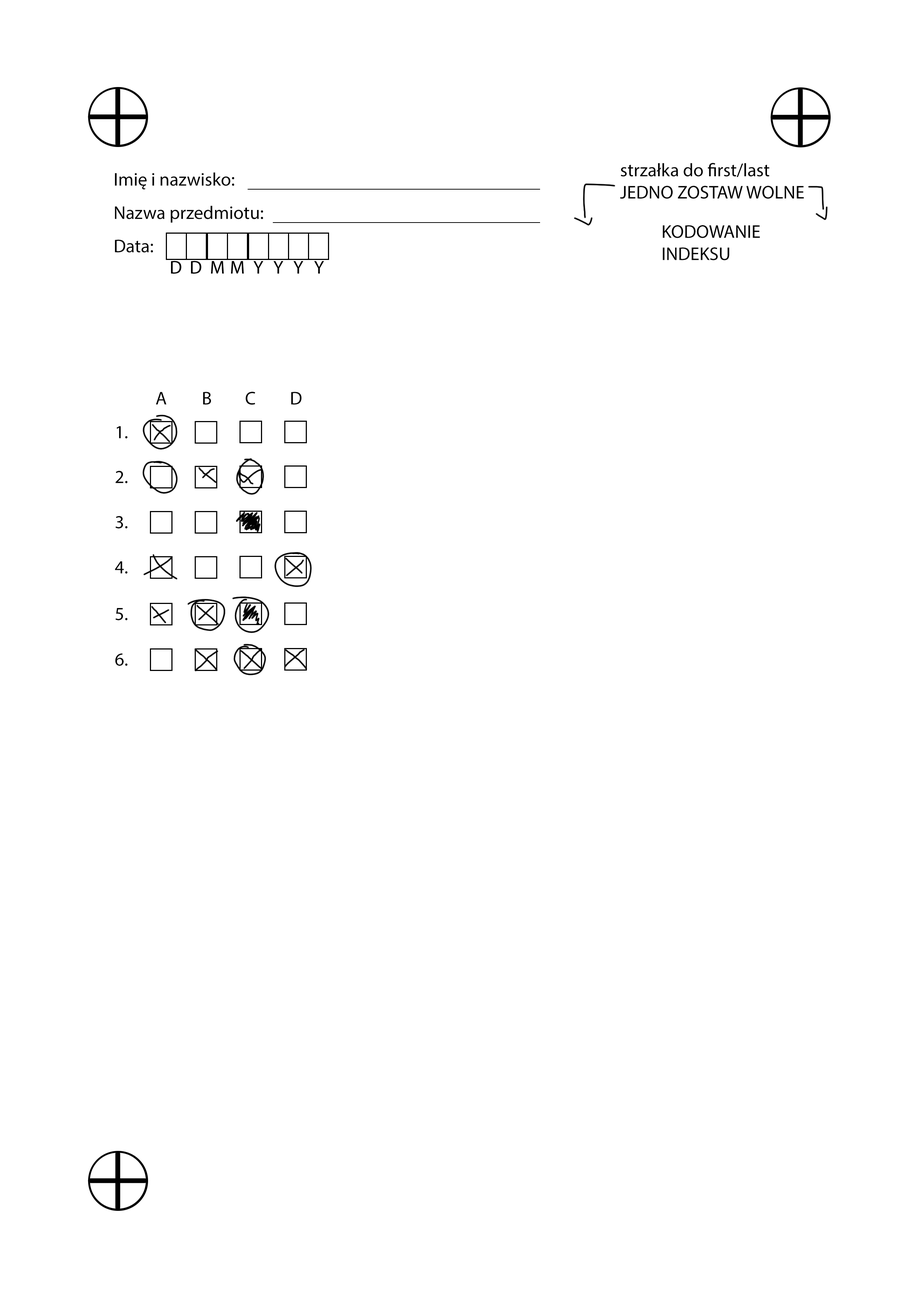
<style>
.page{position:relative;width:918px;height:1299px;background:#ffffff}
.page>*{position:absolute;margin:0}
.t1{font:18.5px "MyriadPro-Regular";color:#000000}
</style>
<div class="page">
<p class="t1" style="left:115px;top:172px;width:119px;height:18px">Imię i nazwisko:</p>
<p class="t1" style="left:620px;top:163px;width:184px;height:36px">strzałka do first/last<br>JEDNO ZOSTAW WOLNE</p>
<p class="t1" style="left:115px;top:205px;width:148px;height:18px">Nazwa przedmiotu:</p>
<p class="t1" style="left:663px;top:225px;width:97px;height:35px">KODOWANIE<br>INDEKSU</p>
<p class="t1" style="left:115px;top:240px;width:38px;height:12px">Data:</p>
<p class="t1" style="left:156px;top:392px;width:11px;height:13px">A</p>
<p class="t1" style="left:203px;top:392px;width:8px;height:13px">B</p>
<p class="t1" style="left:245px;top:392px;width:10px;height:13px">C</p>
<p class="t1" style="left:291px;top:392px;width:11px;height:13px">D</p>
<p class="t1" style="left:117px;top:426px;width:11px;height:12px">1.</p>
<p class="t1" style="left:116px;top:471px;width:12px;height:12px">2.</p>
<p class="t1" style="left:116px;top:516px;width:12px;height:12px">3.</p>
<p class="t1" style="left:115px;top:561px;width:13px;height:12px">4.</p>
<p class="t1" style="left:116px;top:608px;width:12px;height:12px">5.</p>
<p class="t1" style="left:115px;top:653px;width:13px;height:13px">6.</p>
</div>
